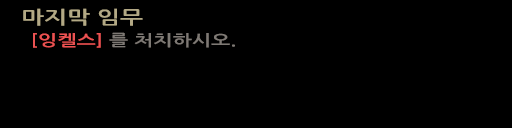
<style>
.page{position:relative;width:512px;height:128px;background:#000000}
.page>*{position:absolute;margin:0}
.t1{font:18px "NanumGothicBold";color:#b4aa86;scale:1.36 1}
.t2{font:15.4px "NanumGothicBold";color:#7e7974;scale:1.33 1}
.t3{font:15.4px "NanumGothicBold";color:#ec5252;scale:1.33 1}
</style>
<div class="page">
<p class="t1" style="left:23px;top:8px;width:120px;height:18px">마지막 임무</p>
<p class="t2" style="left:33px;top:32px;width:202px;height:16px"><span class="t3">[잉켈스] </span>를 처치하시오.</p>
</div>
